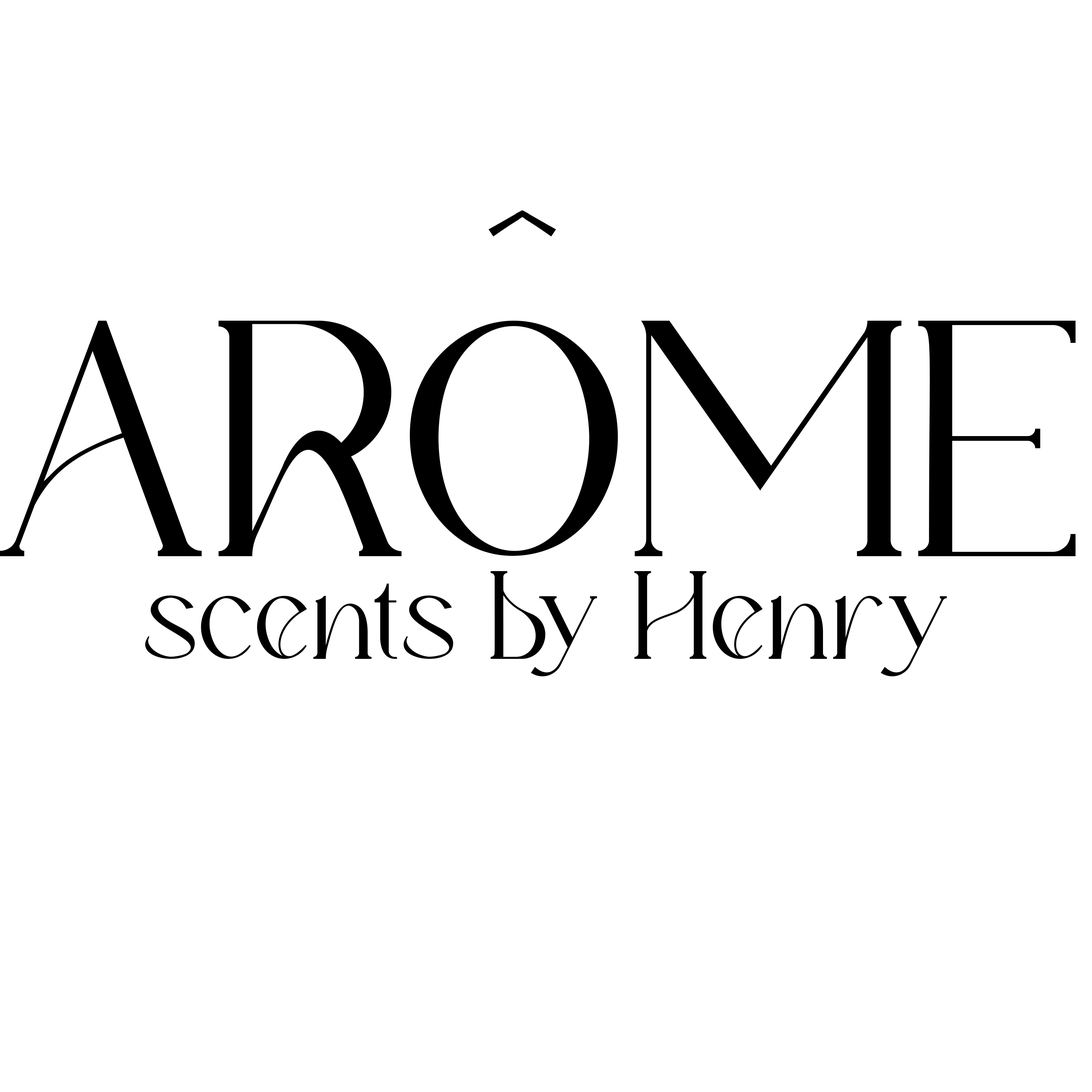
<style>
.page{position:relative;width:1092px;height:1092px;background:#ffffff}
.page>*{position:absolute;margin:0}
.t1{font:336.6px "Fernstad-Regular";color:#000000}
.t2{font:125.5px "Fernstad-Regular";color:#000000}
</style>
<div class="page">
<p class="t1" style="left:0px;top:210px;width:1076px;height:346px">ARÔME</p>
<p class="t2" style="left:145px;top:571px;width:802px;height:105px">scents by Henry</p>
</div>
